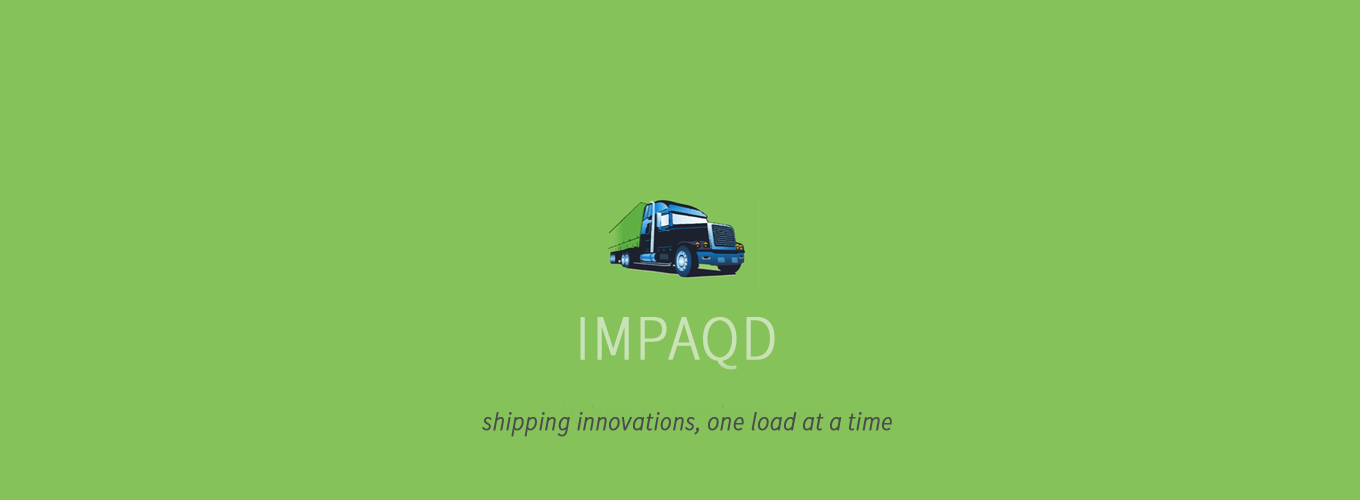
<style>
.page{position:relative;width:1360px;height:500px;background:#85c25a}
.page>*{position:absolute;margin:0}
.t1{font:25.2px "SourceSansPro-LightIt";letter-spacing:0.02em;color:#4c4c4c;font-weight:bold;scale:0.92 1}
</style>
<div class="page">
<p class="t1" style="left:482px;top:412px;width:410px;height:25px">shipping innovations, one load at a time</p>
</div>
